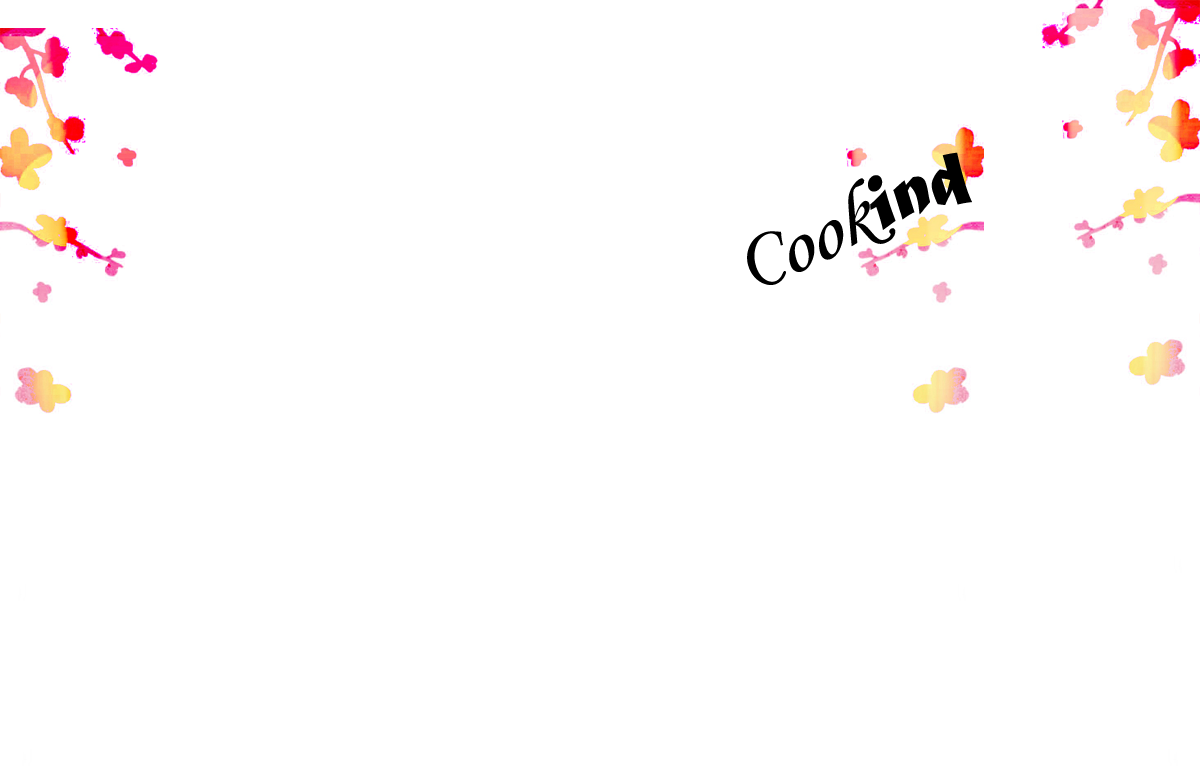
<style>
.page{position:relative;width:1200px;height:784px;background:#ffffff}
.page>*{position:absolute;margin:0}
.t1{font:80px "MonotypeCorsiva";color:#000000}
.t2{font:80px "MaturaMTScriptCapitals";color:#000000}
</style>
<div class="page">
<p class="t1" style="left:747px;top:152px;width:225px;height:133px;rotate:-17deg">Cook<span class="t2">ind</span></p>
</div>
